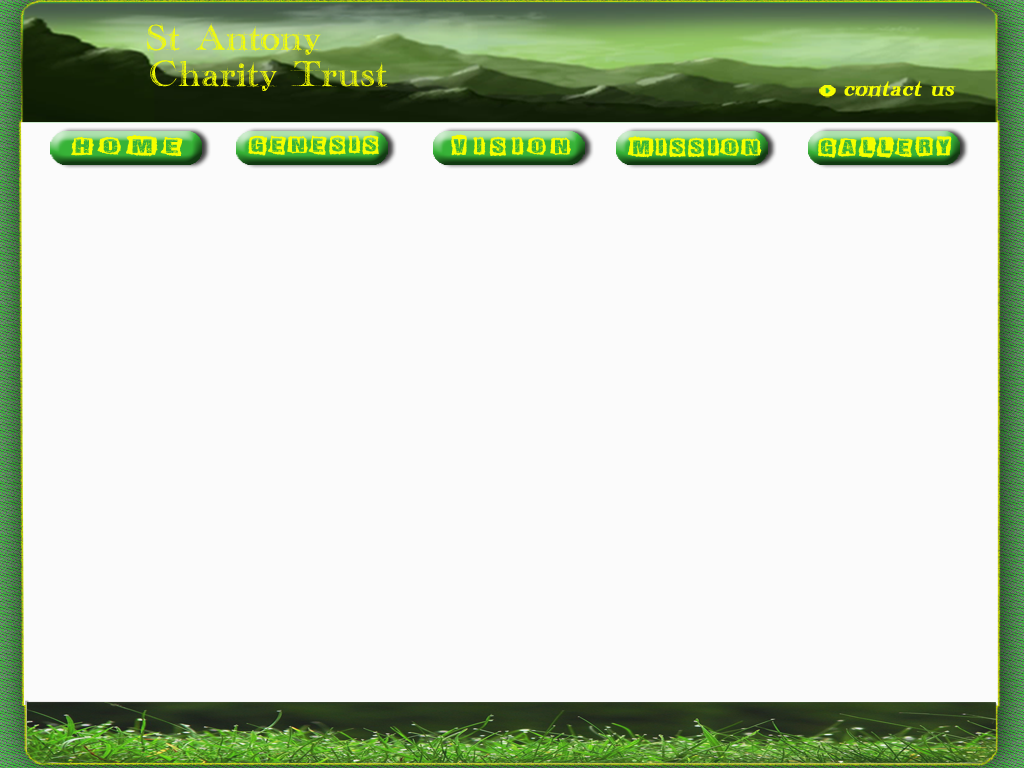
<style>
.page{position:relative;width:1024px;height:768px;background:#fbfbfb}
.page>*{position:absolute;margin:0}
.t1{font:30.1px "handwriting-draft_free-version";color:#f5fe00;scale:1.05 1}
.t2{font:18.3px "handwriting-draft_free-version";color:#f5fe00;font-weight:bold;font-style:italic;scale:1.05 1}
.t3{font:19px "ALLAGESDEMO";letter-spacing:0.3em;color:#f5fe00;scale:1.64 1}
.t4{font:19px "ALLAGESDEMO";letter-spacing:0.2em;color:#f5fe00;scale:1.36 1}
.t5{font:19px "ALLAGESDEMO";letter-spacing:0.3em;color:#f5fe00;scale:1.36 1}
</style>
<div class="page">
<p class="t1" style="left:146px;top:23px;width:242px;height:68px;text-align:center">St Antony<br>     Charity Trust</p>
<p class="t2" style="left:844px;top:81px;width:112px;height:17px">contact us</p>
<p class="t3" style="left:71px;top:134px;width:112px;height:23px">Home</p>
<p class="t4" style="left:248px;top:135px;width:131px;height:21px">genesis</p>
<p class="t5" style="left:451px;top:134px;width:120px;height:23px">vision</p>
<p class="t4" style="left:627px;top:136px;width:135px;height:22px">mission</p>
<p class="t4" style="left:818px;top:136px;width:134px;height:22px">gallery</p>
</div>
